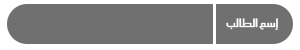
<style>
.page{position:relative;width:300px;height:50px;background:#707070}
.page>*{position:absolute;margin:0}
.t1{font:14px "SC_KHALID";color:#fdfdff}
</style>
<div class="page">
<p class="t1" style="left:226px;top:18px;width:53px;height:12px">إسم الطالب</p>
</div>
